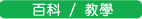
<style>
.page{position:relative;width:142px;height:19px;background:#12ac4c}
.page>*{position:absolute;margin:0}
.t1{font:14px "DFYuan-Md-HK-BF";letter-spacing:0.05em;color:#ffffff}
</style>
<div class="page">
<p class="t1" style="left:32px;top:2px;width:81px;height:15px">百科 / 教學</p>
</div>
